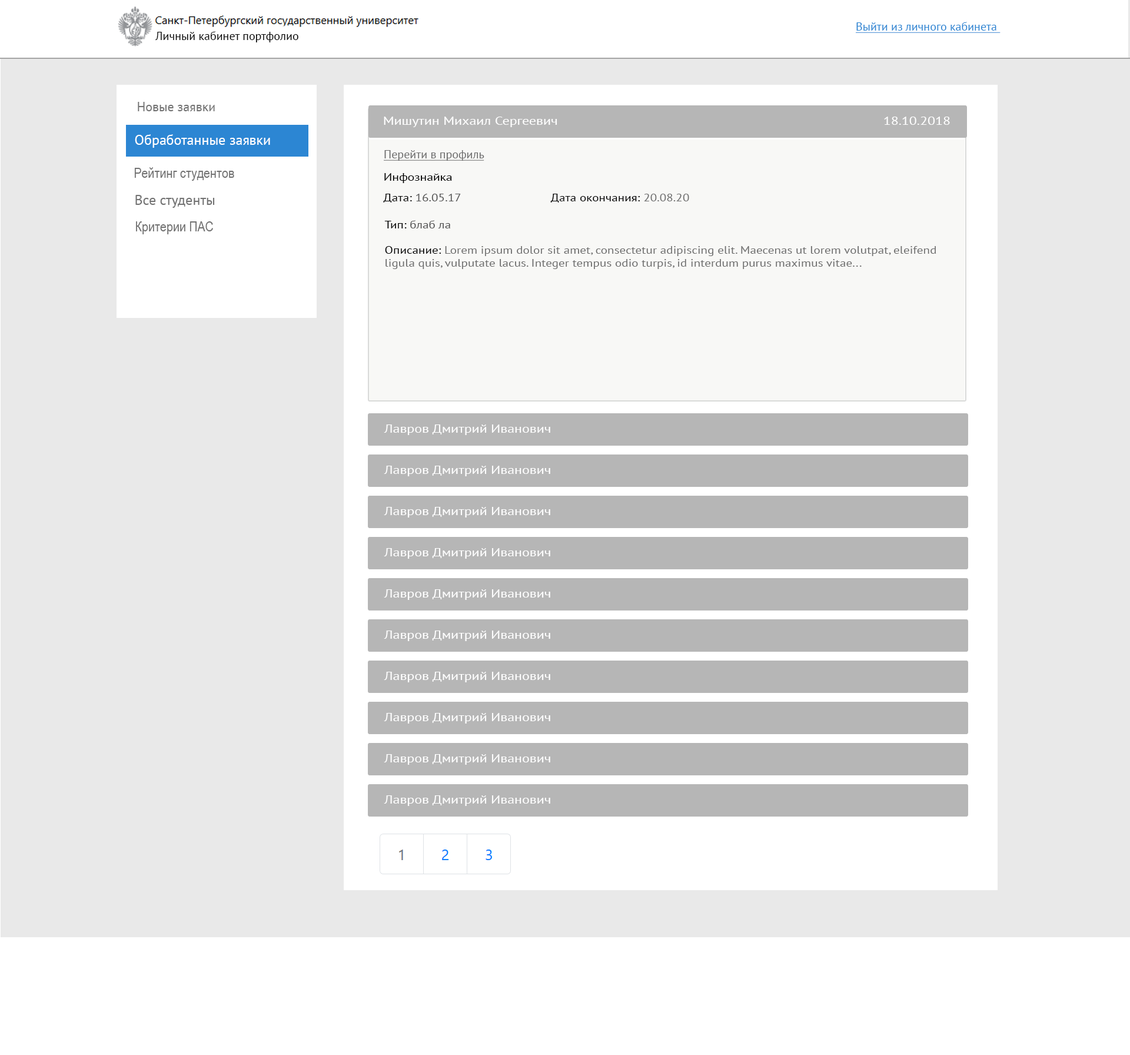
<style>
.page{position:relative;width:1130px;height:1055px;background:#e9e9e9}
.page>*{position:absolute;margin:0}
.t1{font:11.8px "PTSans-Regular";color:#2c86d3;text-decoration:underline}
.t2{font:11.8px "PTSans-Regular";color:#060606}
.t3{font:13px "PTSans-Regular";color:#727272}
.t4{font:11.8px "PTSans-Regular";color:#fefefe;scale:1.19 1}
.t5{font:14.1px "PTSans-Regular";color:#ffffff}
.t6{font:11.8px "PTSans-Regular";color:#6e6e6e;text-decoration:underline}
.t7{font:14.1px "ArialNarrow";color:#727272}
.t8{font:10.6px "PTSans-Regular";color:#000000;scale:1.19 1}
.t9{font:14.1px "PTSans-Regular";color:#727272}
.t10{font:10.4px "PTSans-Regular";color:#535353;scale:1.19 1}
.t11{font:10.4px "PTSans-Regular";color:#000000;scale:1.19 1}
.t12{font:10.4px "PTSans-Regular";color:#6e6e6e;scale:1.19 1}
</style>
<div class="page">
<p class="t1" style="left:856px;top:22px;width:145px;height:11px">Выйти из личного кабинета</p>
<p class="t2" style="left:155px;top:31px;width:143px;height:11px">Личный кабинет портфолио</p>
<p class="t3" style="left:138px;top:102px;width:77px;height:9px">Новые заявки</p>
<p class="t4" style="left:384px;top:117px;width:174px;height:10px">Мишутин Михаил Сергеевич</p>
<p class="t4" style="left:884px;top:117px;width:66px;height:8px">18.10.2018</p>
<p class="t5" style="left:135px;top:134px;width:135px;height:14px">Обработанные заявки</p>
<p class="t6" style="left:384px;top:150px;width:101px;height:11px">Перейти в профиль</p>
<p class="t7" style="left:134px;top:167px;width:100px;height:14px">Рейтинг студентов</p>
<p class="t8" style="left:384px;top:173px;width:68px;height:10px">Инфознайка</p>
<p class="t9" style="left:135px;top:195px;width:80px;height:13px">Все студенты</p>
<p class="t10" style="left:383px;top:194px;width:78px;height:9px"><span class="t11">Дата: </span>16.05.17</p>
<p class="t11" style="left:550px;top:194px;width:139px;height:9px">Дата окончания: <span class="t12">20.08.20</span></p>
<p class="t7" style="left:136px;top:221px;width:77px;height:13px">Критерии ПАС</p>
<p class="t10" style="left:384px;top:220px;width:66px;height:8px"><span class="t11">Тип: </span>блаб ла</p>
<p class="t12" style="left:385px;top:246px;width:552px;height:23px"><span class="t11">Описание: </span>Lorem ipsum dolor sit amet, consectetur adipiscing elit. Maecenas ut lorem volutpat, eleifend<br>ligula quis, vulputate lacus. Integer tempus odio turpis, id interdum purus maximus vitae...</p>
<p class="t4" style="left:384px;top:424px;width:166px;height:11px">Лавров Дмитрий Иванович</p>
<p class="t4" style="left:384px;top:466px;width:166px;height:10px">Лавров Дмитрий Иванович</p>
<p class="t4" style="left:384px;top:507px;width:166px;height:10px">Лавров Дмитрий Иванович</p>
<p class="t4" style="left:384px;top:548px;width:166px;height:11px">Лавров Дмитрий Иванович</p>
<p class="t4" style="left:384px;top:589px;width:166px;height:11px">Лавров Дмитрий Иванович</p>
<p class="t4" style="left:384px;top:631px;width:166px;height:10px">Лавров Дмитрий Иванович</p>
<p class="t4" style="left:384px;top:672px;width:166px;height:10px">Лавров Дмитрий Иванович</p>
<p class="t4" style="left:384px;top:713px;width:166px;height:11px">Лавров Дмитрий Иванович</p>
<p class="t4" style="left:384px;top:754px;width:166px;height:11px">Лавров Дмитрий Иванович</p>
<p class="t4" style="left:384px;top:795px;width:166px;height:11px">Лавров Дмитрий Иванович</p>
</div>
